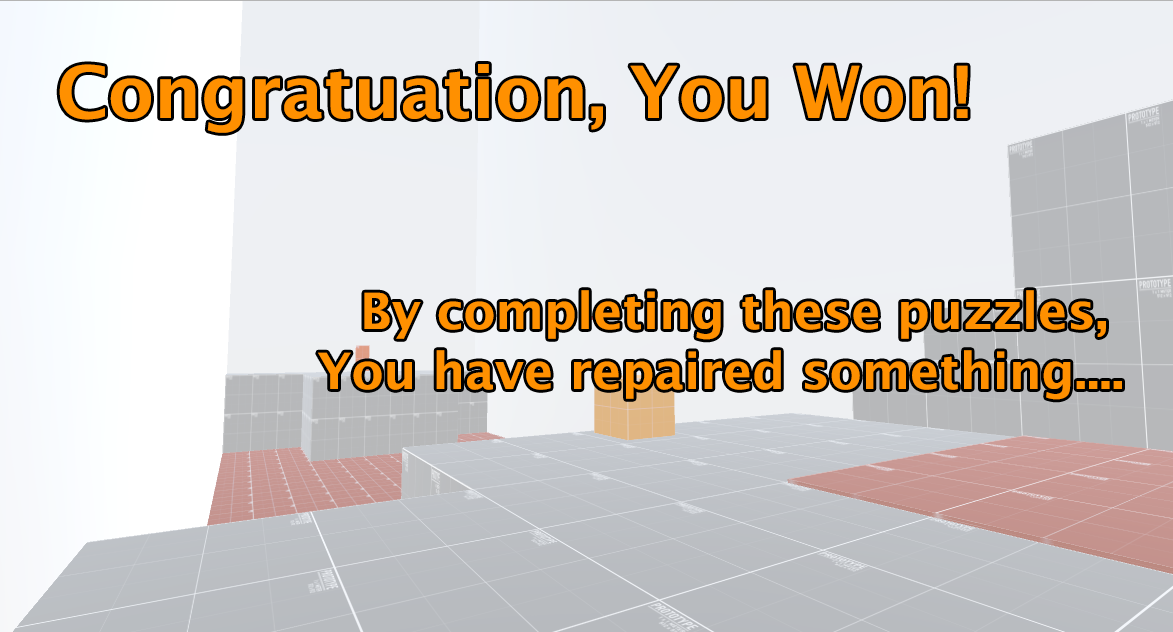
<style>
.page{position:relative;width:1173px;height:632px}
.page>*{position:absolute;margin:0}
.t1{font:72px "LucidaSans-Demi";color:#ff9000}
.t2{font:50px "LucidaSans-Demi";color:#ff9000}
</style>
<div class="page">
<p class="t1" style="left:59px;top:64px;width:909px;height:69px">Congratuation, You Won!</p>
<p class="t2" style="left:318px;top:290px;width:804px;height:110px;text-align:right">By completing these puzzles, <br>You have repaired something....</p>
</div>
